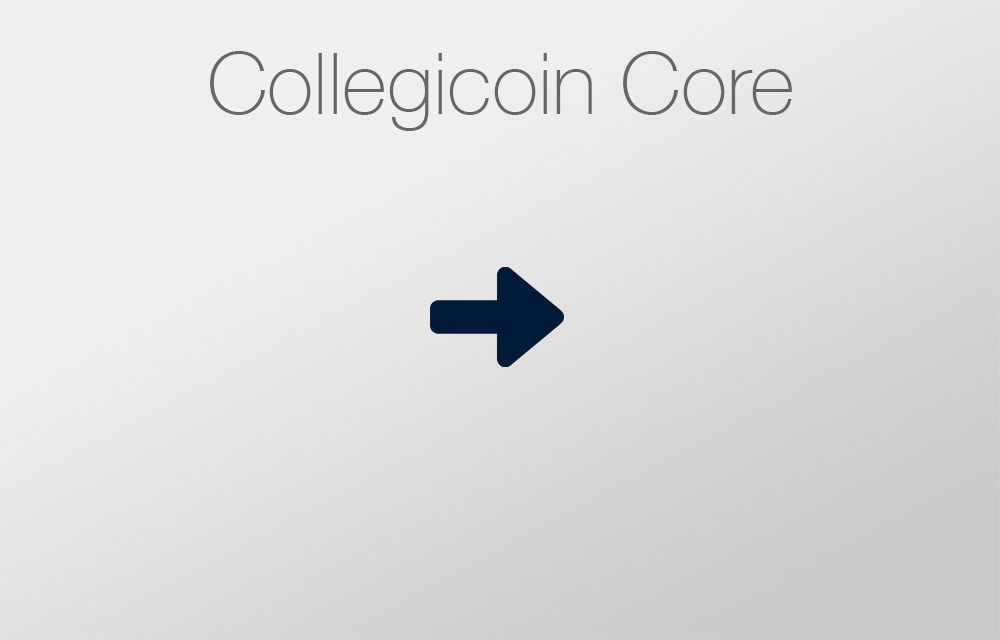
<style>
.page{position:relative;width:1000px;height:640px}
.page>*{position:absolute;margin:0}
.t1{font:85.7px "HelveticaNeue-Thin";color:#666666}
</style>
<div class="page">
<p class="t1" style="left:210px;top:51px;width:582px;height:80px">Collegicoin Core</p>
</div>
